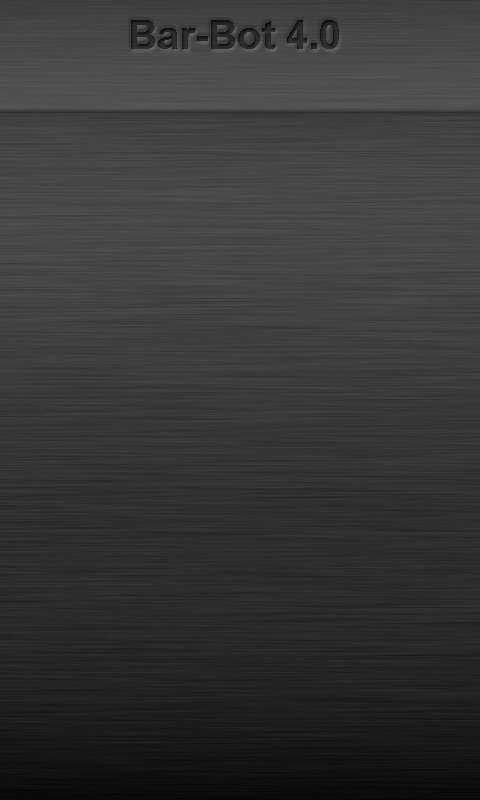
<style>
.page{position:relative;width:480px;height:800px}
.page>*{position:absolute;margin:0}
.t1{font:40px "Arial-BoldMT";color:#272727}
</style>
<div class="page">
<p class="t1" style="left:131px;top:20px;width:208px;height:29px">Bar-Bot 4.0</p>
</div>
